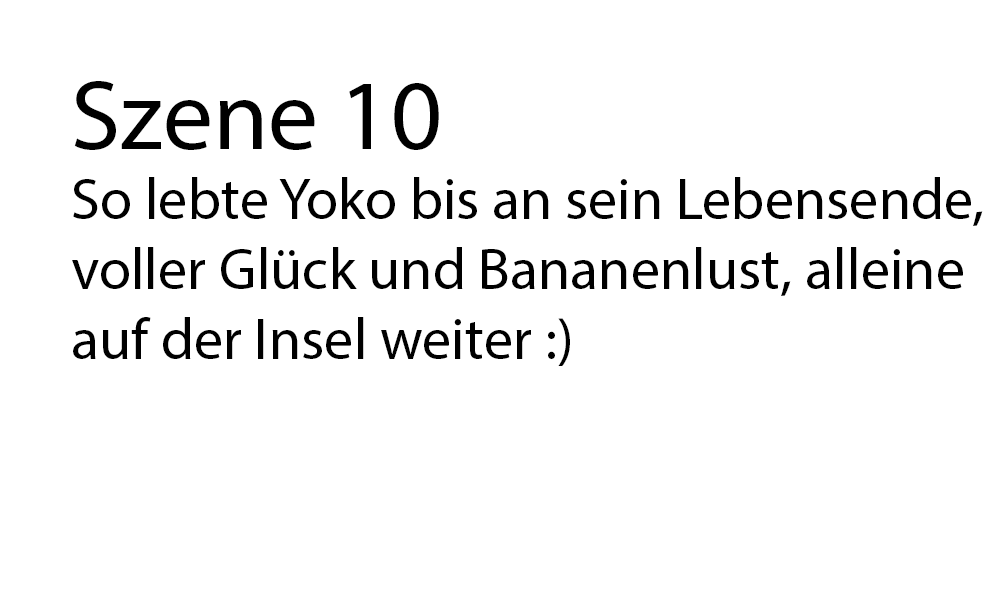
<style>
.page{position:relative;width:1000px;height:616px;background:#ffffff}
.page>*{position:absolute;margin:0}
.t1{font:58.3px "MyriadPro-Regular";color:#000000}
.t2{font:100px "MyriadPro-Regular";color:#000000}
</style>
<div class="page">
<p class="t1" style="left:72px;top:81px;width:911px;height:285px"><span class="t2">Szene 10<br></span>So lebte Yoko bis an sein Lebensende, <br>voller Glück und Bananenlust, alleine<br>auf der Insel weiter :)</p>
</div>
